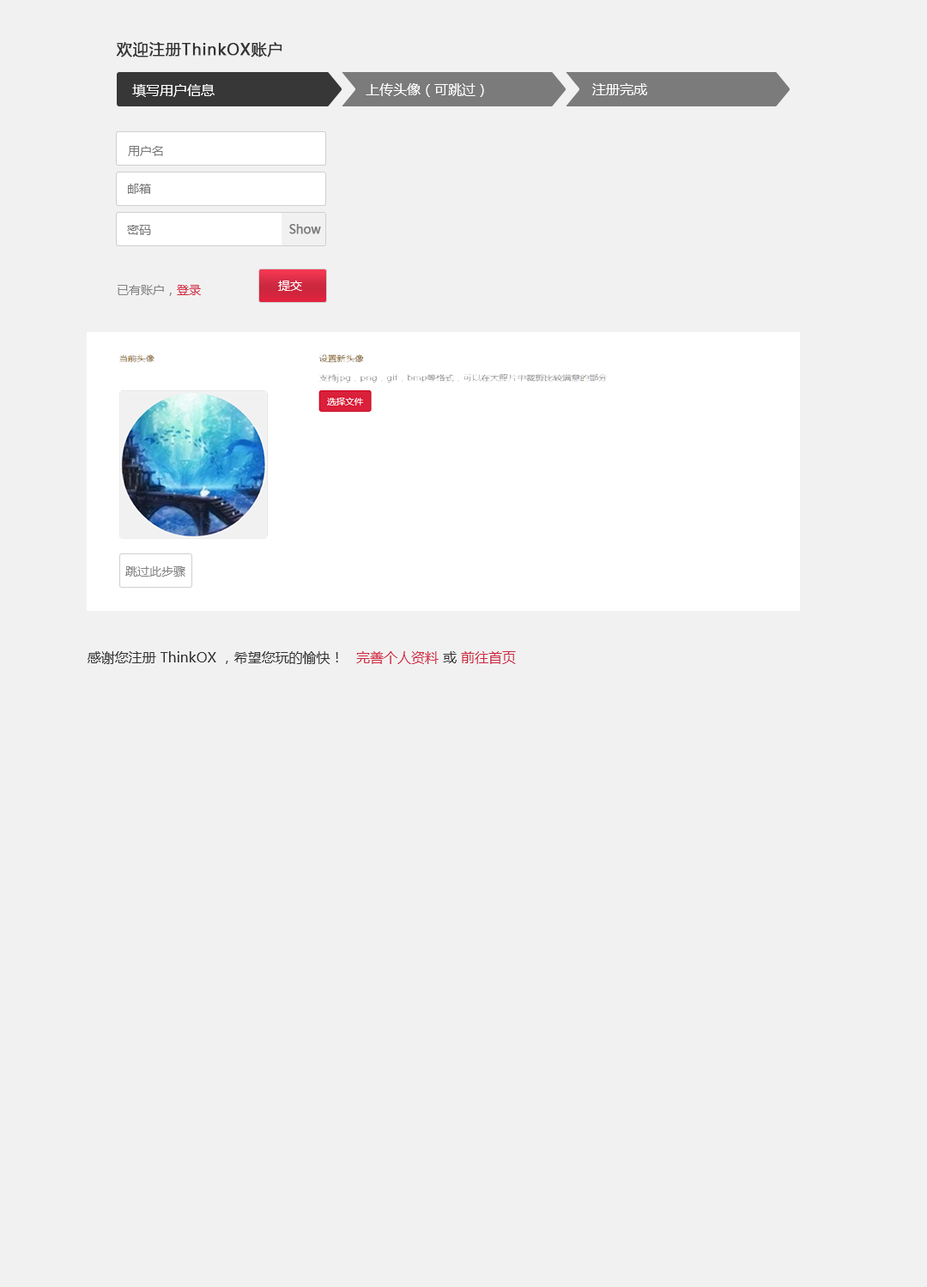
<style>
.page{position:relative;width:927px;height:1287px;background:#f1f1f1}
.page>*{position:absolute;margin:0}
.t1{font:15.4px "MicrosoftYaHei";color:#333333;font-weight:bold}
.t2{font:13.7px "MicrosoftYaHei";color:#ffffff}
.t3{font:12px "MicrosoftYaHei";color:#7a7a7a}
.t4{font:12px "MicrosoftYaHei";color:#7a7a7a;font-weight:bold}
.t5{font:12px "MicrosoftYaHei";color:#fffefe}
.t6{font:12px "MicrosoftYaHei";color:#848484}
.t7{font:12px "MicrosoftYaHei";color:#d22b43}
.t8{font:13.7px "MicrosoftYaHei";color:#333333}
.t9{font:13.7px "MicrosoftYaHei";color:#d02b43}
.t10{font:13.7px "MicrosoftYaHei";color:#cb273f}
</style>
<div class="page">
<p class="t1" style="left:116px;top:42px;width:166px;height:15px">欢迎注册ThinkOX账户</p>
<p class="t2" style="left:132px;top:84px;width:82px;height:13px">填写用户信息</p>
<p class="t2" style="left:365px;top:83px;width:119px;height:14px">上传头像（可跳过）</p>
<p class="t2" style="left:592px;top:83px;width:55px;height:12px">注册完成</p>
<p class="t3" style="left:128px;top:146px;width:35px;height:10px">用户名</p>
<p class="t3" style="left:128px;top:184px;width:23px;height:10px">邮箱</p>
<p class="t3" style="left:127px;top:225px;width:24px;height:10px">密码</p>
<p class="t4" style="left:289px;top:224px;width:32px;height:10px">Show</p>
<p class="t5" style="left:278px;top:281px;width:24px;height:10px">提交</p>
<p class="t6" style="left:118px;top:285px;width:83px;height:11px">已有账户<span class="t3">，</span><span class="t7">登录</span></p>
<p class="t6" style="left:125px;top:566px;width:60px;height:11px">跳过此步骤</p>
<p class="t8" style="left:88px;top:651px;width:250px;height:13px">感谢您注册 ThinkOX ，希望您玩的愉快！</p>
<p class="t9" style="left:356px;top:651px;width:160px;height:13px">完善个人资料<span class="t8"> 或 </span><span class="t10">前往首页</span></p>
</div>
